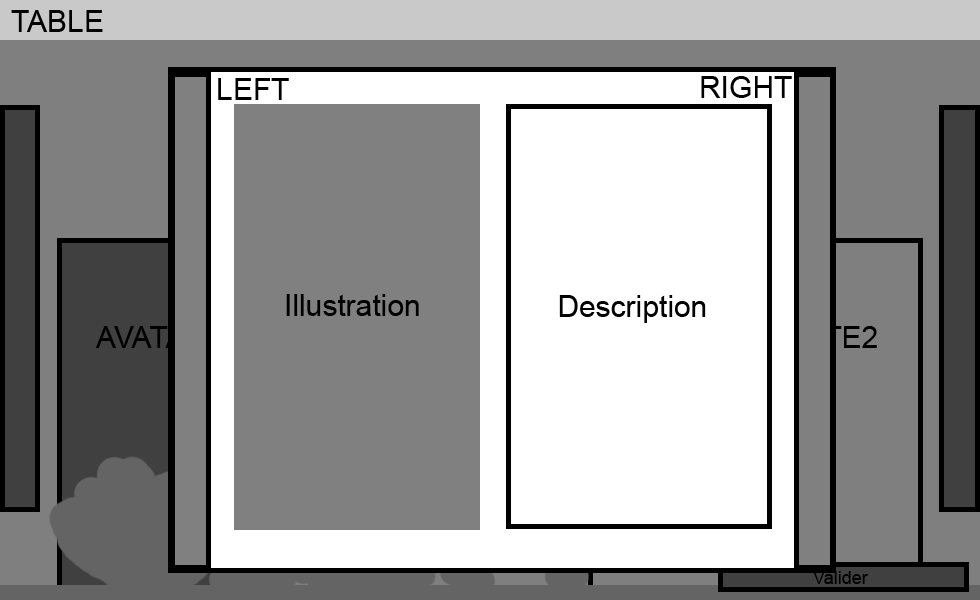
<style>
.page{position:relative;width:980px;height:600px;background:#ffffff}
.page>*{position:absolute;margin:0}
.t1{font:30px "ArialMT";color:#000000}
</style>
<div class="page">
<p class="t1" style="left:11px;top:10px;width:92px;height:22px">TABLE</p>
<p class="t1" style="left:218px;top:78px;width:71px;height:22px">LEFT</p>
<p class="t1" style="left:701px;top:76px;width:91px;height:22px">RIGHT</p>
<p class="t1" style="left:286px;top:294px;width:133px;height:22px">Illustration</p>
<p class="t1" style="left:559px;top:295px;width:147px;height:28px">Description</p>
</div>
